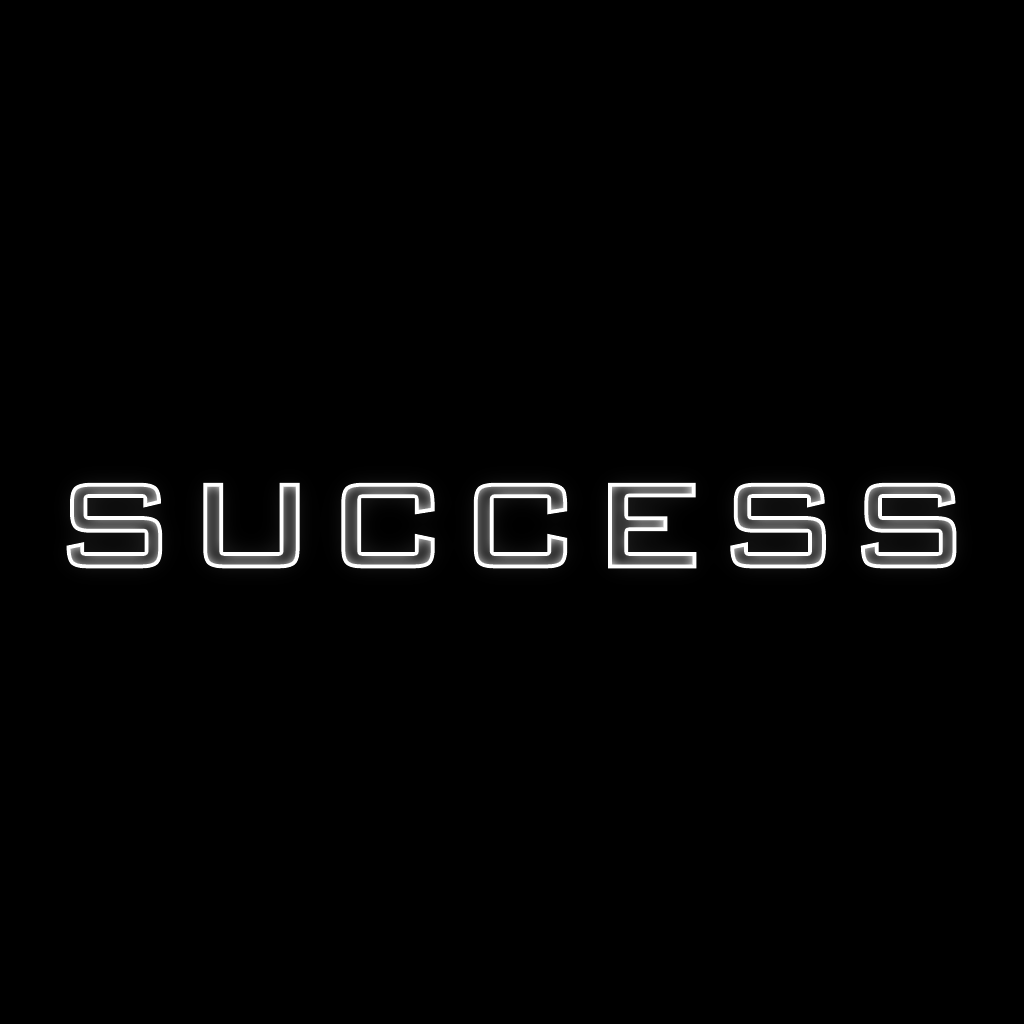
<style>
.page{position:relative;width:1024px;height:1024px;background:#000000}
.page>*{position:absolute;margin:0}
.t1{font:165.4px "BankGothicBold";text-transform:uppercase}
</style>
<div class="page">
<p class="t1" style="left:66px;top:482px;width:891px;height:87px">Success</p>
</div>
